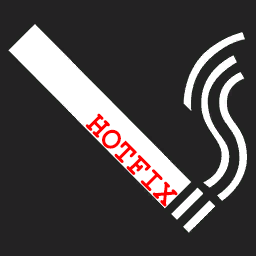
<style>
.page{position:relative;width:256px;height:256px;background:#232223}
.page>*{position:absolute;margin:0}
.t1{font:32px "CourierNewPS-BoldMT";color:#ff0000;text-transform:uppercase}
</style>
<div class="page">
<p class="t1" style="left:85px;top:113px;width:93px;height:94px;rotate:45deg">hotfix</p>
</div>
